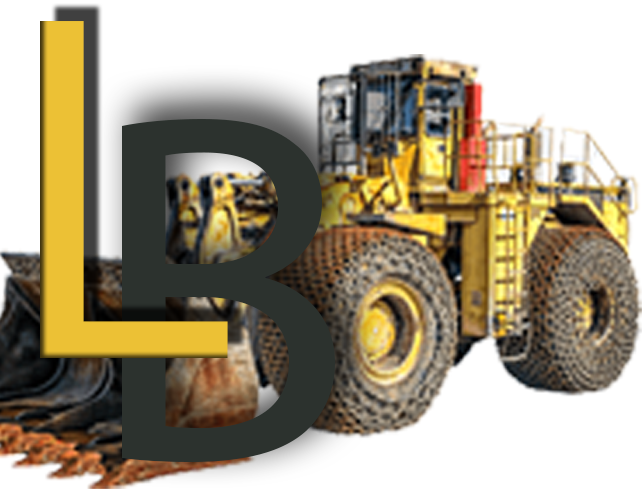
<style>
.page{position:relative;width:642px;height:489px;background:#ffffff}
.page>*{position:absolute;margin:0}
.t1{font:500px "MyriadPro-Regular";color:#ecc135}
.t2{font:500px "MyriadPro-Regular";color:#2c322e}
</style>
<div class="page">
<p class="t1" style="left:40px;top:21px;width:188px;height:337px">L</p>
<p class="t2" style="left:122px;top:119px;width:213px;height:343px">B</p>
</div>
